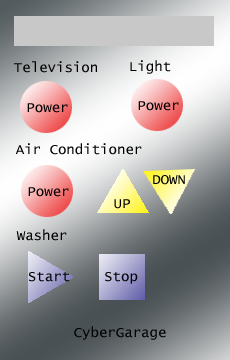
<style>
.page{position:relative;width:230px;height:360px}
.page>*{position:absolute;margin:0}
.t1{font:14px "LucidaConsole";color:#000000}
</style>
<div class="page">
<p class="t1" style="left:14px;top:61px;width:83px;height:12px">Television</p>
<p class="t1" style="left:130px;top:60px;width:41px;height:14px">Light</p>
<p class="t1" style="left:138px;top:101px;width:41px;height:10px">Power</p>
<p class="t1" style="left:27px;top:103px;width:41px;height:10px">Power</p>
<p class="t1" style="left:15px;top:143px;width:127px;height:12px">Air Conditioner</p>
<p class="t1" style="left:153px;top:175px;width:32px;height:10px">DOWN</p>
<p class="t1" style="left:28px;top:187px;width:41px;height:10px">Power</p>
<p class="t1" style="left:114px;top:199px;width:16px;height:10px">UP</p>
<p class="t1" style="left:16px;top:229px;width:51px;height:12px">Washer</p>
<p class="t1" style="left:29px;top:272px;width:41px;height:10px">Start</p>
<p class="t1" style="left:105px;top:272px;width:33px;height:12px">Stop</p>
<p class="t1" style="left:74px;top:326px;width:92px;height:14px">CyberGarage</p>
</div>
